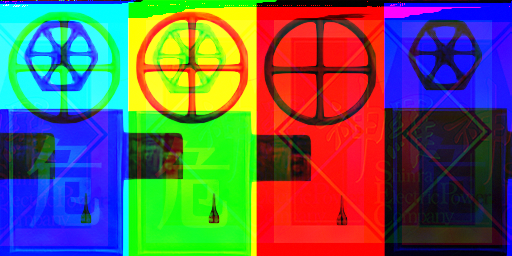
<style>
.page{position:relative;width:512px;height:256px}
.page>*{position:absolute;margin:0}
.t1{font:102.5px "Kan415TyposStd-Regular";scale:0.81 1}
</style>
<div class="page">
<p class="t1" style="left:27px;top:130px;width:75px;height:94px">危</p>
</div>
